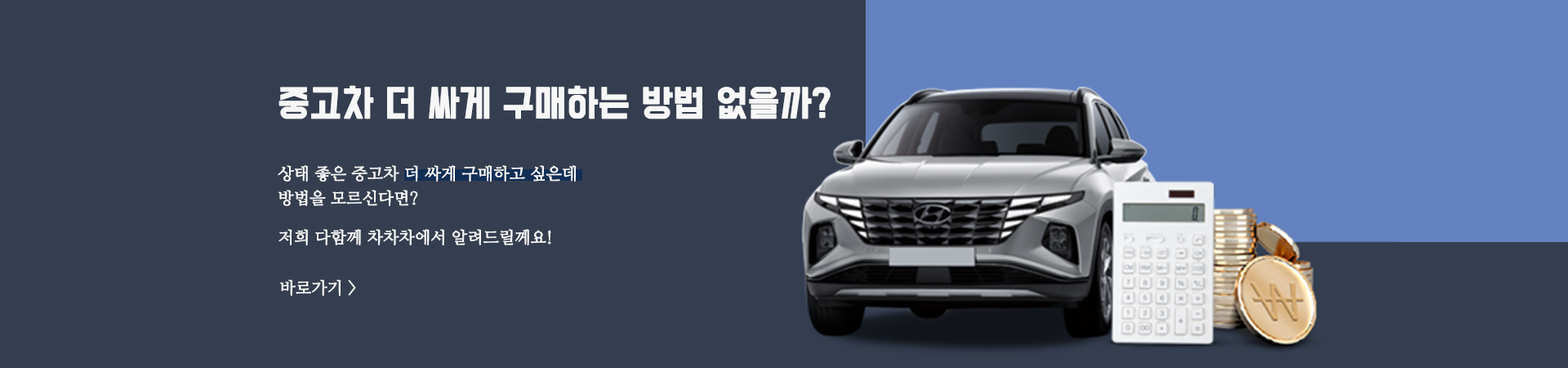
<style>
.page{position:relative;width:1568px;height:368px;background:#353e50}
.page>*{position:absolute;margin:0}
.t1{font:32.7px "BMDoHyeon";letter-spacing:-0.01em;color:#f7f7f7;font-weight:bold}
.t2{font:16.3px/24.5px "NanumMyeongjo";letter-spacing:-0.01em;color:#f7f7f7;font-weight:bold}
.t3{font:16.3px/19.6px "NanumMyeongjo";letter-spacing:-0.01em;color:#f7f7f7;font-weight:bold}
.t4{font:16.3px "NanumMyeongjo";letter-spacing:-0.01em;color:#f7f7f7;font-weight:bold}
</style>
<div class="page">
<p class="t1" style="left:278px;top:85px;width:553px;height:34px">중고차 더 싸게 구매하는 방법 없을까?</p>
<p class="t2" style="left:278px;top:165px;width:299px;height:80px">상태 좋은 중고차 더 싸게 구매하고 싶은데 <br>방법을 모르신다면? <br><span class="t3"><br>저희 다함께 차차차에서 알려드릴께요!</span></p>
<p class="t4" style="left:280px;top:279px;width:76px;height:17px">바로가기 &gt;</p>
</div>
